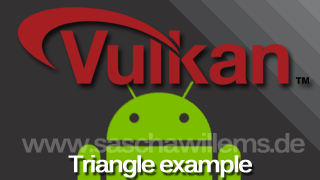
<style>
.page{position:relative;width:320px;height:180px;background:#343132}
.page>*{position:absolute;margin:0}
.t1{font:26px "Kalinga-Bold";letter-spacing:-0.075em;font-weight:bold}
.t2{font:23.4px "Kalinga-Bold";letter-spacing:-0.075em;color:#ffffff;font-weight:bold}
</style>
<div class="page">
<p class="t1" style="left:21px;top:132px;width:284px;height:21px">www.saschawillems.de</p>
<p class="t2" style="left:68px;top:155px;width:184px;height:23px">Triangle example</p>
</div>
